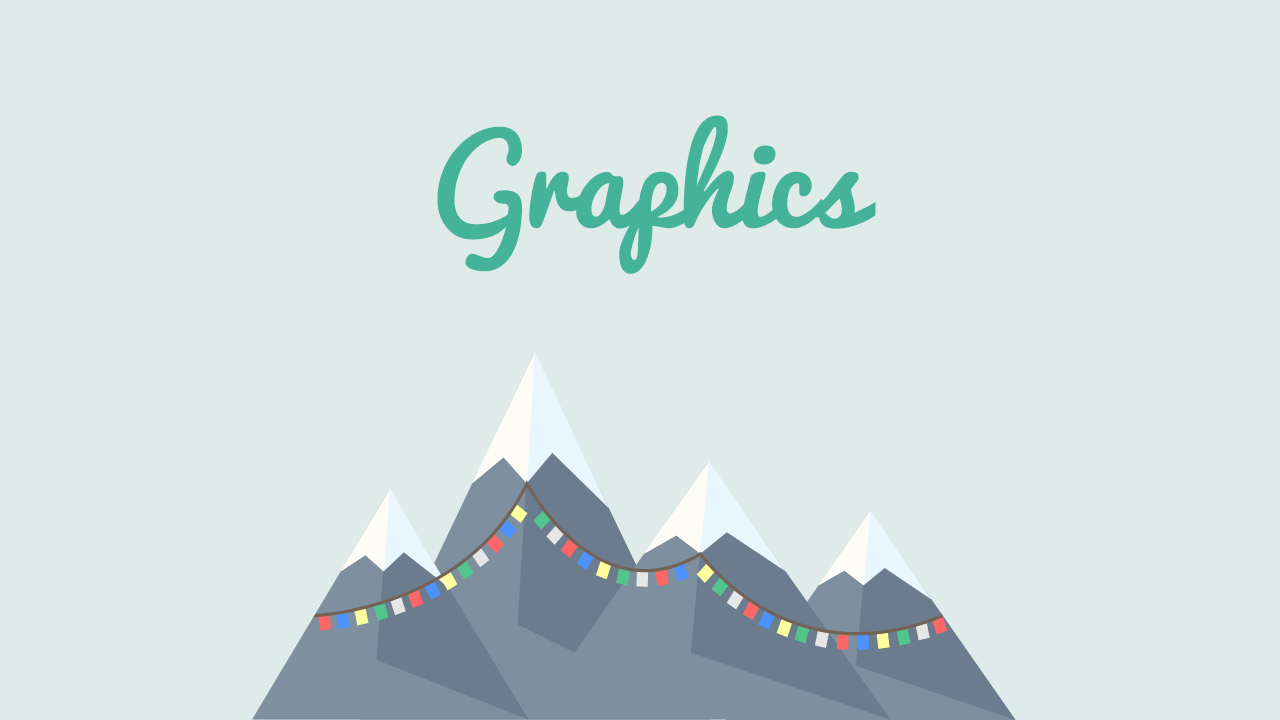
<style>
.page{position:relative;width:1280px;height:720px;background:#dfebe8}
.page>*{position:absolute;margin:0}
.t1{font:120px "Pacifico-Regular";color:#45b29a}
</style>
<div class="page">
<p class="t1" style="left:437px;top:115px;width:439px;height:159px">Graphics</p>
</div>
